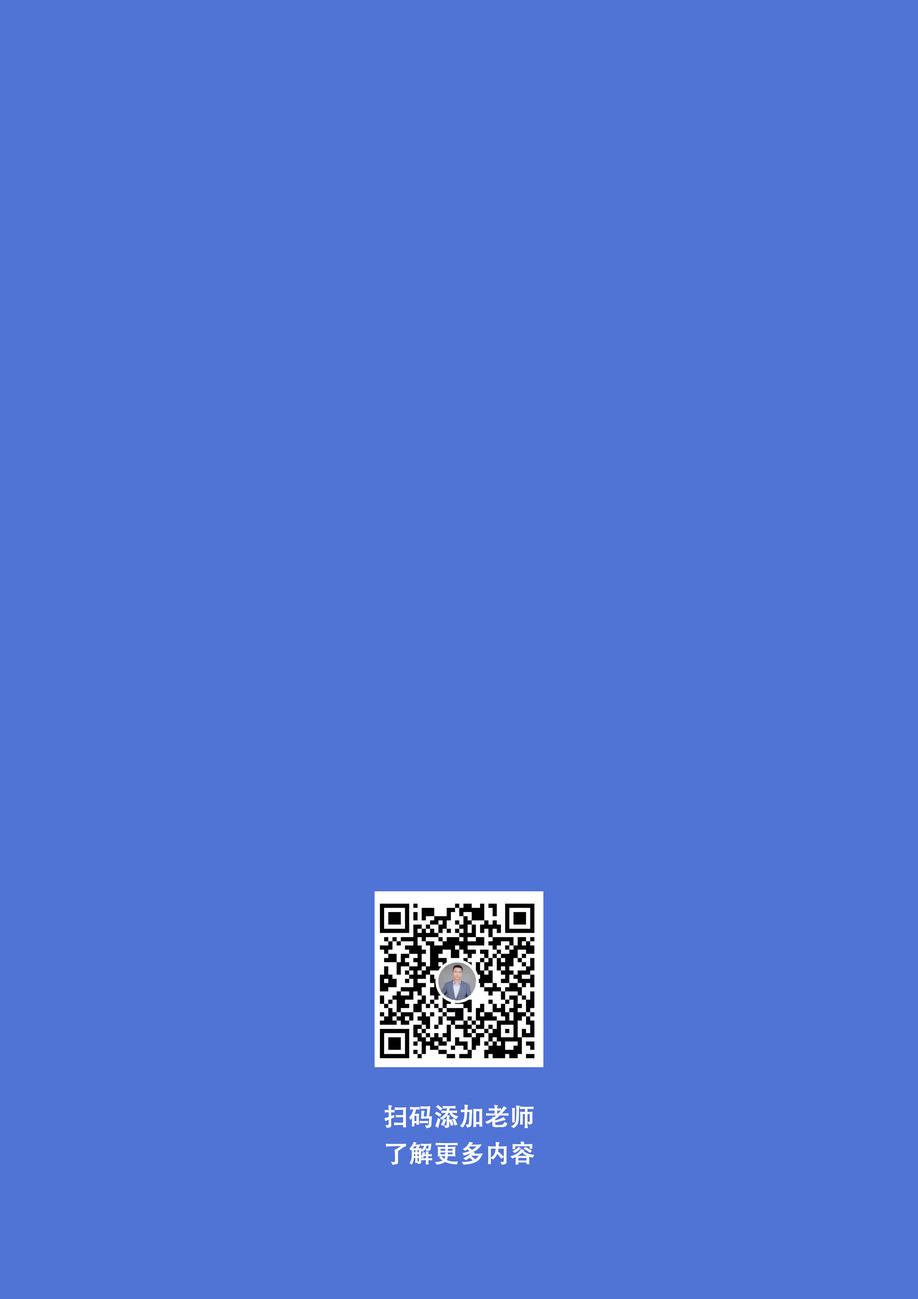
<style>
.page{position:relative;width:918px;height:1299px;background:#5073d6}
.page>*{position:absolute;margin:0}
.t1{font:24.7px/36.6px "AdobeHeitiStd-Regular";color:#ffffff;font-weight:bold}
</style>
<div class="page">
<p class="t1" style="left:384px;top:1104px;width:150px;height:61px">扫码添加老师<br>了解更多内容</p>
</div>
